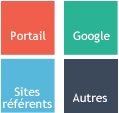
<style>
.page{position:relative;width:119px;height:113px;background:#3c495a}
.page>*{position:absolute;margin:0}
.t1{font:12px "TrebuchetMS";color:#ffffff}
.t2{font:12px/12px "TrebuchetMS";color:#ffffff}
</style>
<div class="page">
<p class="t1" style="left:11px;top:31px;width:35px;height:9px">Portail</p>
<p class="t1" style="left:73px;top:31px;width:37px;height:12px">Google</p>
<p class="t2" style="left:3px;top:87px;width:49px;height:21px;text-align:center">Sites <br>référents</p>
<p class="t1" style="left:72px;top:93px;width:35px;height:9px">Autres</p>
</div>
